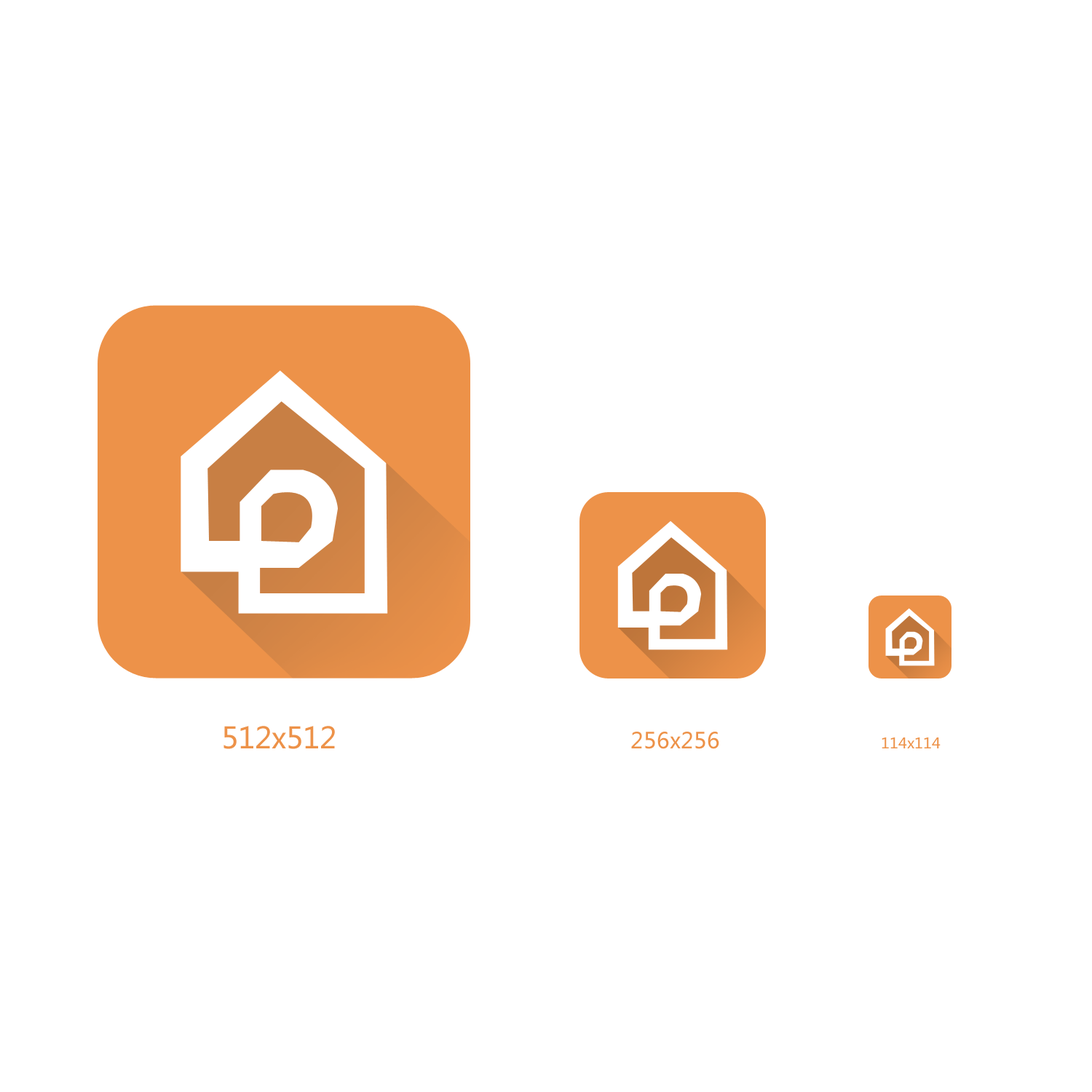
<style>
.page{position:relative;width:1092px;height:1092px;background:#ffffff}
.page>*{position:absolute;margin:0}
.t1{font:29.1px "MicrosoftYaHei";color:#ed9249}
.t2{font:21.8px "MicrosoftYaHei";color:#ed9249}
.t3{font:14.6px "MicrosoftYaHei";color:#ed9249}
</style>
<div class="page">
<p class="t1" style="left:223px;top:726px;width:112px;height:23px">512x512</p>
<p class="t2" style="left:631px;top:732px;width:88px;height:17px">256x256</p>
<p class="t3" style="left:882px;top:737px;width:59px;height:11px">114x114</p>
</div>
